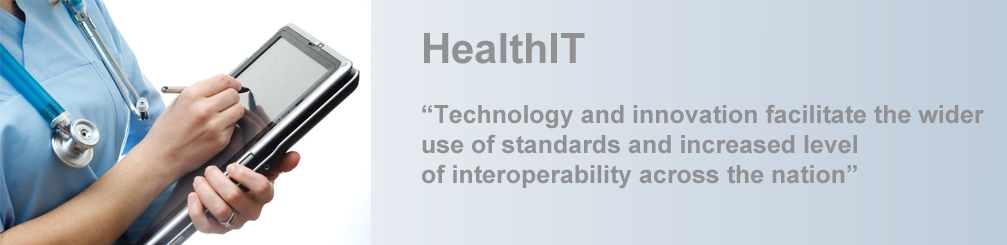
<style>
.page{position:relative;width:1007px;height:245px}
.page>*{position:absolute;margin:0}
.t1{font:25px "Arial-BoldMT";color:#919194}
.t2{font:41.7px "Arial-BoldMT";color:#919194}
</style>
<div class="page">
<p class="t1" style="left:422px;top:33px;width:562px;height:156px"><span class="t2">HealthIT<br></span><br>“Technology and innovation facilitate the wider <br>use of standards and increased level <br>of interoperability across the nation”</p>
</div>
